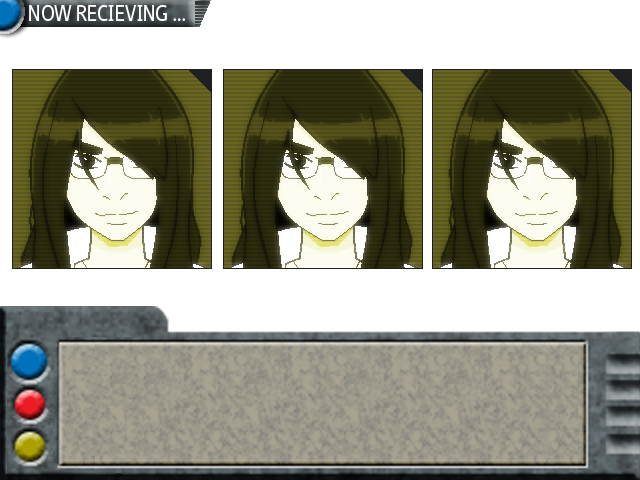
<style>
.page{position:relative;width:640px;height:480px;background:#ffffff}
.page>*{position:absolute;margin:0}
.t1{font:21.2px "NeueSans-Normal";color:#ffffff;scale:0.91 1}
</style>
<div class="page">
<p class="t1" style="left:29px;top:5px;width:156px;height:16px">NOW RECIEVING ...</p>
</div>
